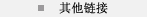
<style>
.page{position:relative;width:147px;height:17px;background:#f1f1f1}
.page>*{position:absolute;margin:0}
.t1{font:12px "SimSun";color:#000000;font-weight:bold}
</style>
<div class="page">
<p class="t1" style="left:39px;top:0px;width:89px;height:17px">其他链接</p>
</div>
